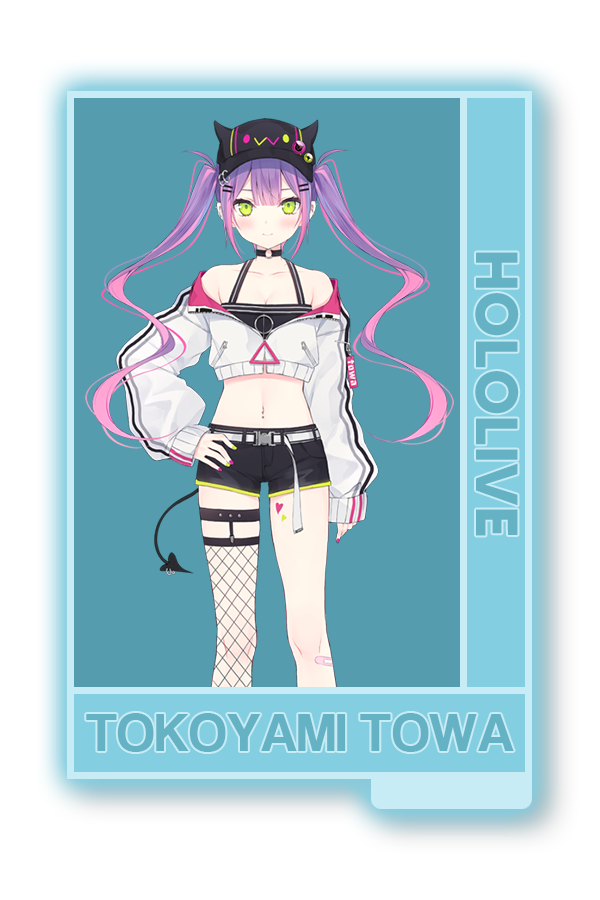
<style>
.page{position:relative;width:600px;height:900px;background:#549cae}
.page>*{position:absolute;margin:0}
.t1{font:59.2px "MADETOMMY-Bold";color:#66b2c5}
.t2{font:56.4px "CoolveticaRg-Regular";color:#66b2c5}
</style>
<div class="page">
<p class="t1" style="left:475px;top:252px;width:44px;height:284px;rotate:90deg">HOLOLIVE</p>
<p class="t2" style="left:86px;top:713px;width:428px;height:39px">TOKOYAMI TOWA</p>
</div>
